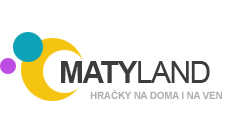
<style>
.page{position:relative;width:237px;height:123px;background:#ffffff}
.page>*{position:absolute;margin:0}
.t1{font:30px "Arial-BoldMT";letter-spacing:-0.05em;color:#3c3c3c;text-transform:uppercase}
.t2{font:30px "ArialMT";letter-spacing:-0.05em;color:#3c3c3c;text-transform:uppercase}
.t3{font:10px "Arial-BoldMT";letter-spacing:-0.025em;color:#afafaf;text-transform:uppercase}
</style>
<div class="page">
<p class="t1" style="left:61px;top:61px;width:149px;height:22px">maty<span class="t2">land</span></p>
<p class="t3" style="left:90px;top:89px;width:132px;height:10px">hračky na doma i na ven</p>
</div>
